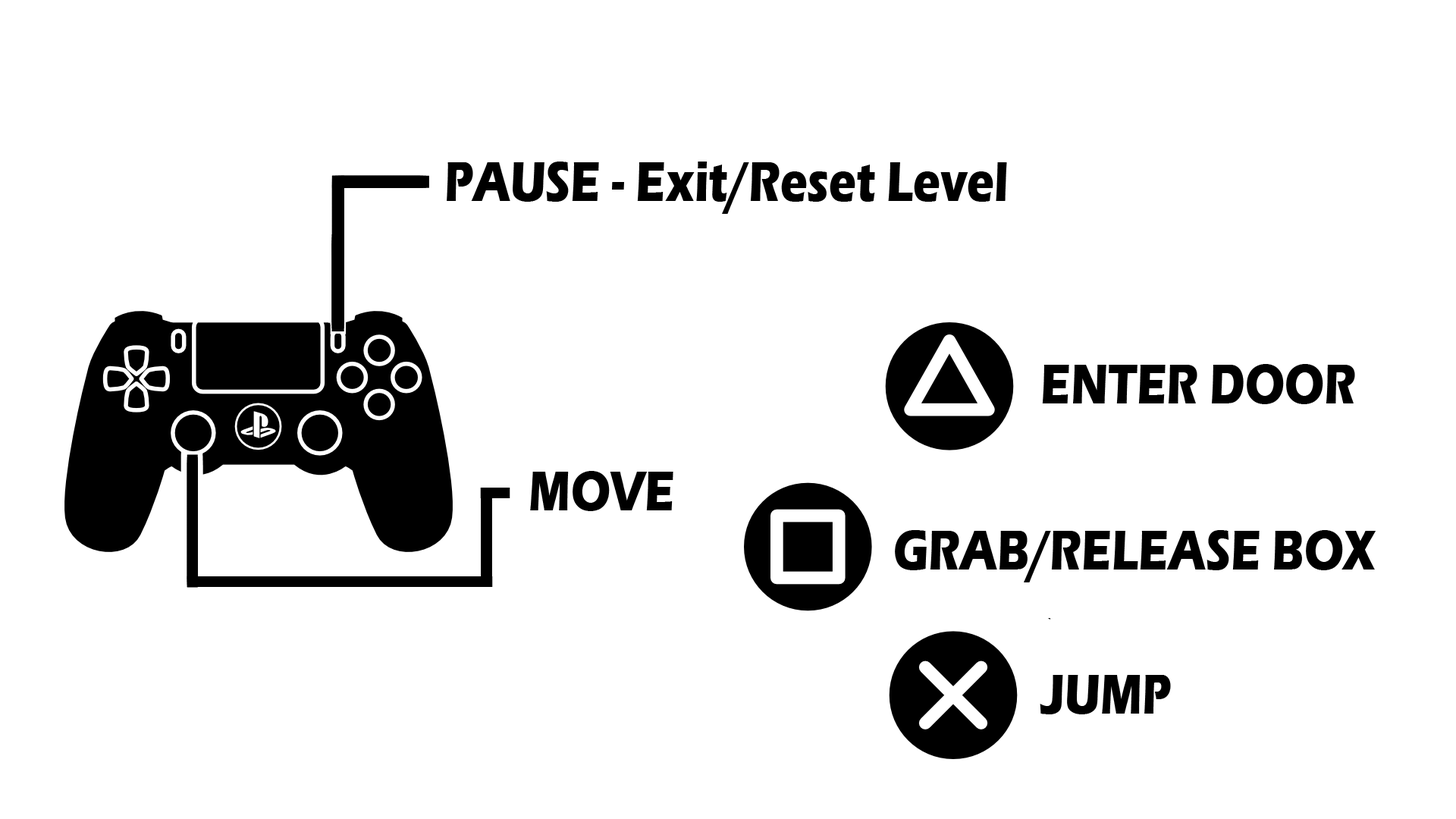
<style>
.page{position:relative;width:1456px;height:819px;background:#ffffff}
.page>*{position:absolute;margin:0}
.t1{font:57.8px "ErasITC-Bold";color:#000000;scale:0.79 1}
</style>
<div class="page">
<p class="t1" style="left:447px;top:162px;width:560px;height:52px">PAUSE - Exit/Reset Level</p>
<p class="t1" style="left:1042px;top:364px;width:313px;height:40px">ENTER DOOR</p>
<p class="t1" style="left:530px;top:471px;width:143px;height:40px">MOVE</p>
<p class="t1" style="left:895px;top:530px;width:481px;height:52px">GRAB/RELEASE BOX</p>
<p class="t1" style="left:1040px;top:675px;width:131px;height:39px">JUMP</p>
</div>
